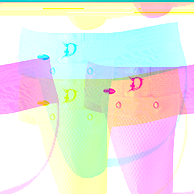
<style>
.page{position:relative;width:194px;height:194px;background:#ffffff}
.page>*{position:absolute;margin:0}
.t1{font:14.8px "MetalMacabre";scale:0.84 1}
</style>
<div class="page">
<p class="t1" style="left:61px;top:39px;width:17px;height:19px;rotate:5deg">D</p>
</div>
